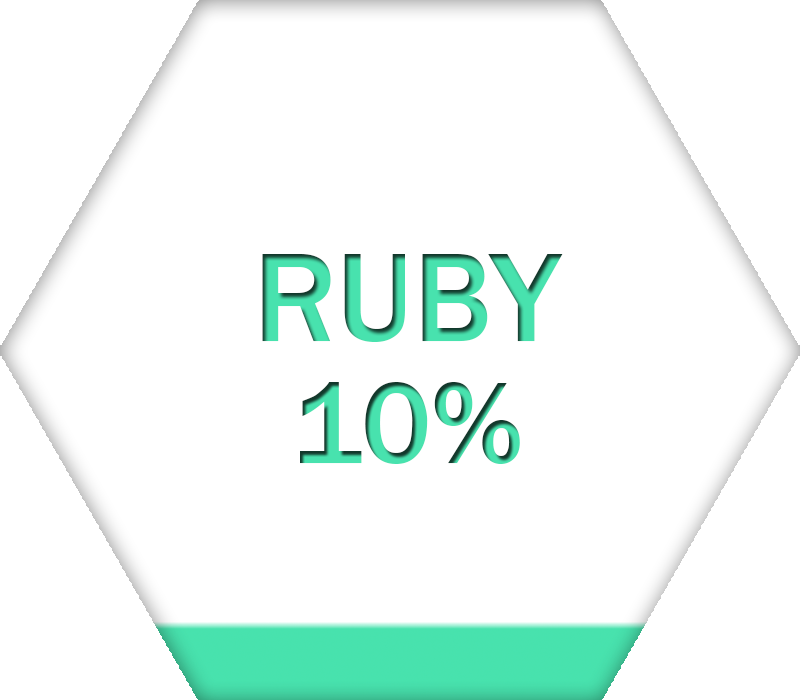
<style>
.page{position:relative;width:800px;height:700px;background:#ffffff}
.page>*{position:absolute;margin:0}
.t1{font:130px "FranklinGothic-Medium";color:#48e2ae}
.t2{font:120px "FranklinGothic-Medium"}
</style>
<div class="page">
<p class="t1" style="left:262px;top:254px;width:301px;height:88px">RUBY</p>
<p class="t2" style="left:300px;top:382px;width:220px;height:82px">10%</p>
</div>
